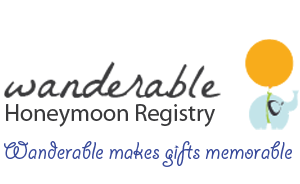
<style>
.page{position:relative;width:300px;height:184px;background:#ffffff}
.page>*{position:absolute;margin:0}
.t1{font:24px "MyriadPro-Regular";color:#3a3a3c}
.t2{font:28px "GiddyupStd";color:#384a9b}
</style>
<div class="page">
<p class="t1" style="left:6px;top:104px;width:209px;height:23px">Honeymoon Registry</p>
<p class="t2" style="left:4px;top:141px;width:288px;height:26px">Wanderable makes gifts memorable</p>
</div>
